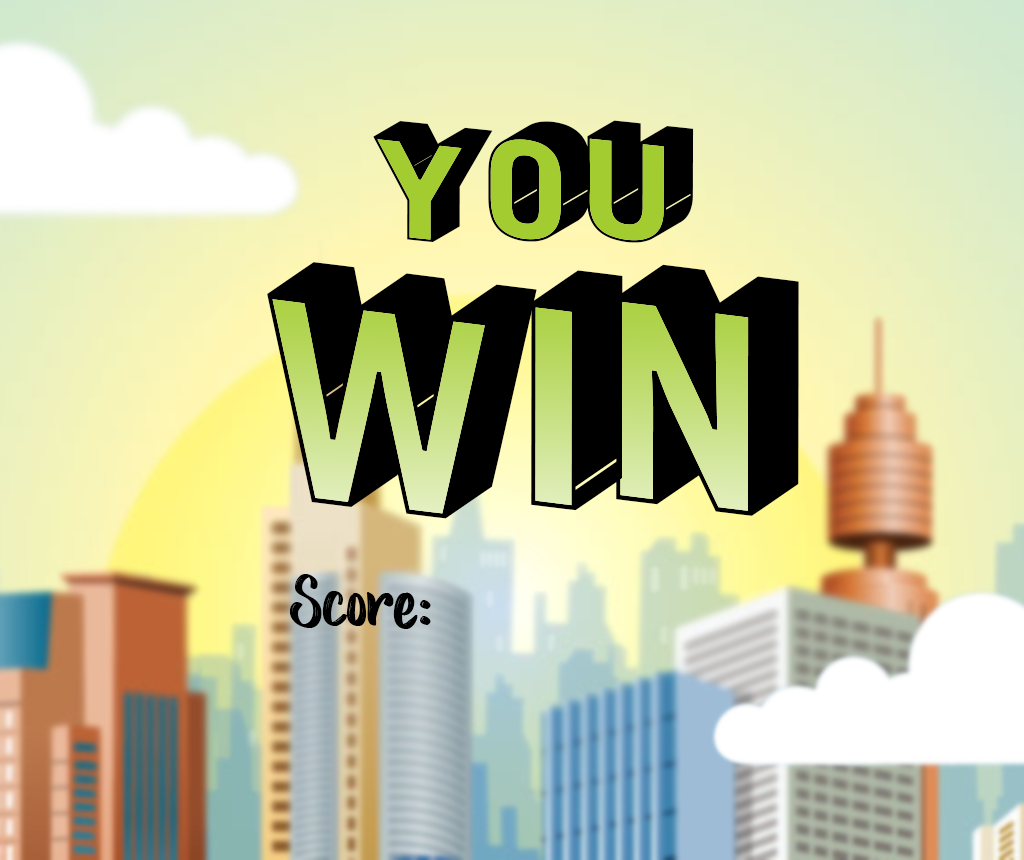
<style>
.page{position:relative;width:1024px;height:860px}
.page>*{position:absolute;margin:0}
.t1{font:144.8px "PonyMaker";color:#000000;scale:1.13 1}
.t2{font:295.7px "PonyMaker";color:#000000;scale:0.96 1}
.t3{font:72px "Love-Story-Rough";color:#000000}
</style>
<div class="page">
<p class="t1" style="left:373px;top:120px;width:321px;height:123px">YOU</p>
<p class="t2" style="left:267px;top:262px;width:532px;height:257px">Win</p>
<p class="t3" style="left:290px;top:574px;width:141px;height:55px">Score:</p>
</div>
